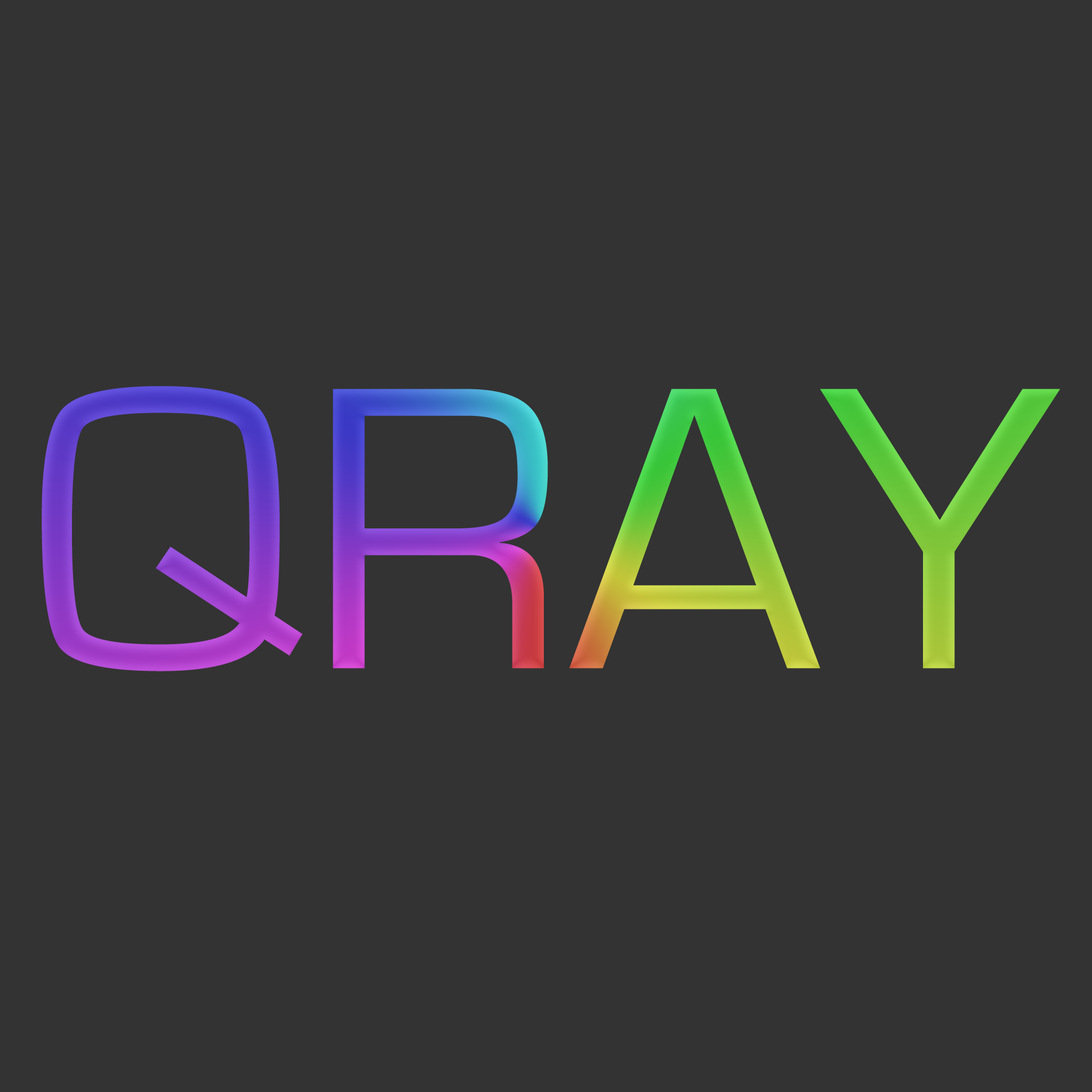
<style>
.page{position:relative;width:1092px;height:1092px;background:#333333}
.page>*{position:absolute;margin:0}
.t1{font:418.8px "EurostileRegular"}
</style>
<div class="page">
<p class="t1" style="left:42px;top:386px;width:1018px;height:285px">QRAY</p>
</div>
